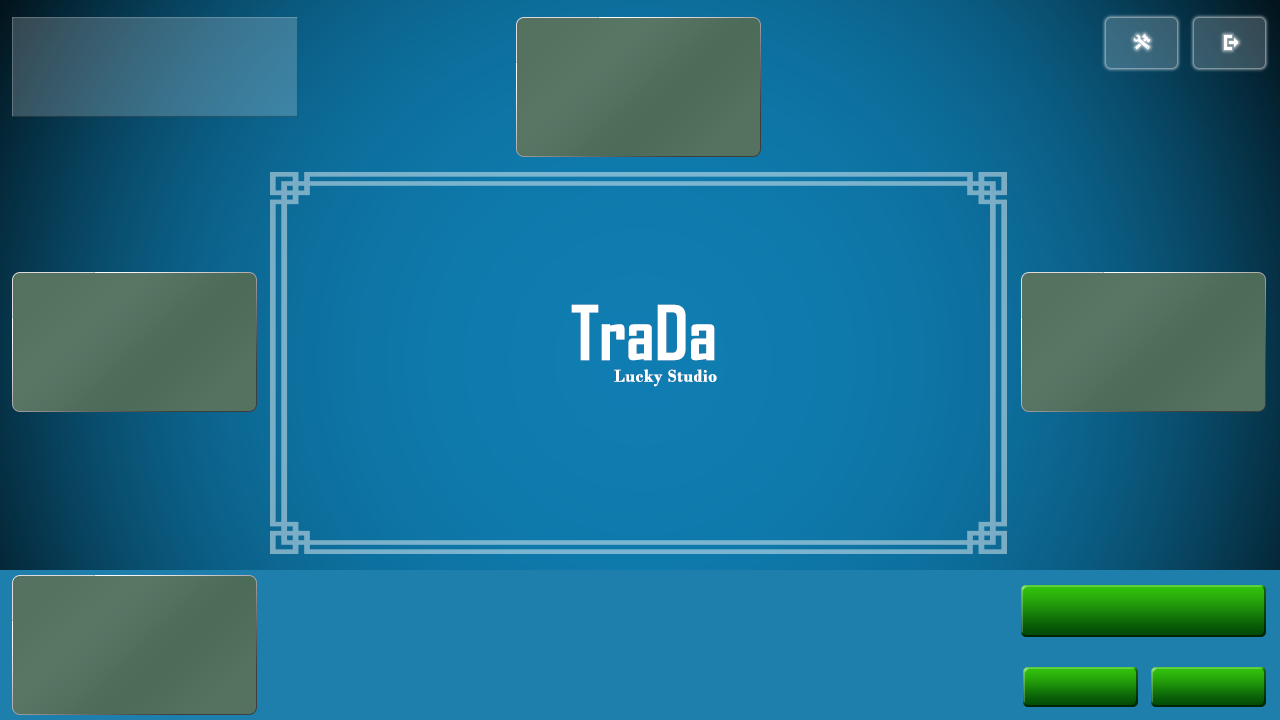
<style>
.page{position:relative;width:1280px;height:720px}
.page>*{position:absolute;margin:0}
.t1{font:18px "BodoniMT-Bold";letter-spacing:0.025em;color:#ffffff}
.t2{font:72px "AgencyFB-Bold";color:#ffffff}
</style>
<div class="page">
<p class="t1" style="left:571px;top:304px;width:146px;height:83px;text-align:right"><span class="t2">TraDa<br></span>Lucky Studio</p>
</div>
